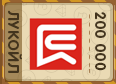
<style>
.page{position:relative;width:116px;height:84px;background:#eadab4}
.page>*{position:absolute;margin:0}
.t1{font:15px "RotondaC-Bold";letter-spacing:0.04em;color:#43341d;text-transform:uppercase}
</style>
<div class="page">
<p class="t1" style="left:8px;top:10px;width:14px;height:63px;rotate:90deg">Лукойл</p>
<p class="t1" style="left:95px;top:12px;width:11px;height:59px;rotate:90deg">200 000</p>
</div>
